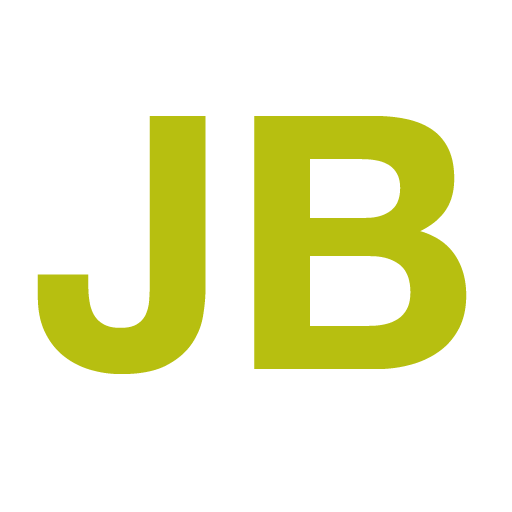
<style>
.page{position:relative;width:512px;height:512px;background:#ffffff}
.page>*{position:absolute;margin:0}
.t1{font:353.9px "HelveticaNeue-Bold";color:#b7bf10}
</style>
<div class="page">
<p class="t1" style="left:37px;top:116px;width:430px;height:258px">JB</p>
</div>
